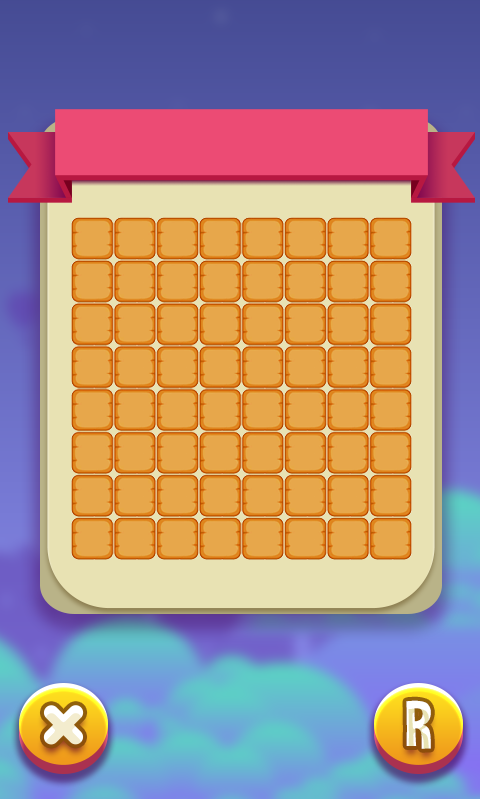
<style>
.page{position:relative;width:480px;height:799px}
.page>*{position:absolute;margin:0}
.t1{font:62.2px "DimboRegular"}
</style>
<div class="page">
<p class="t1" style="left:406px;top:700px;width:25px;height:49px">R</p>
</div>
